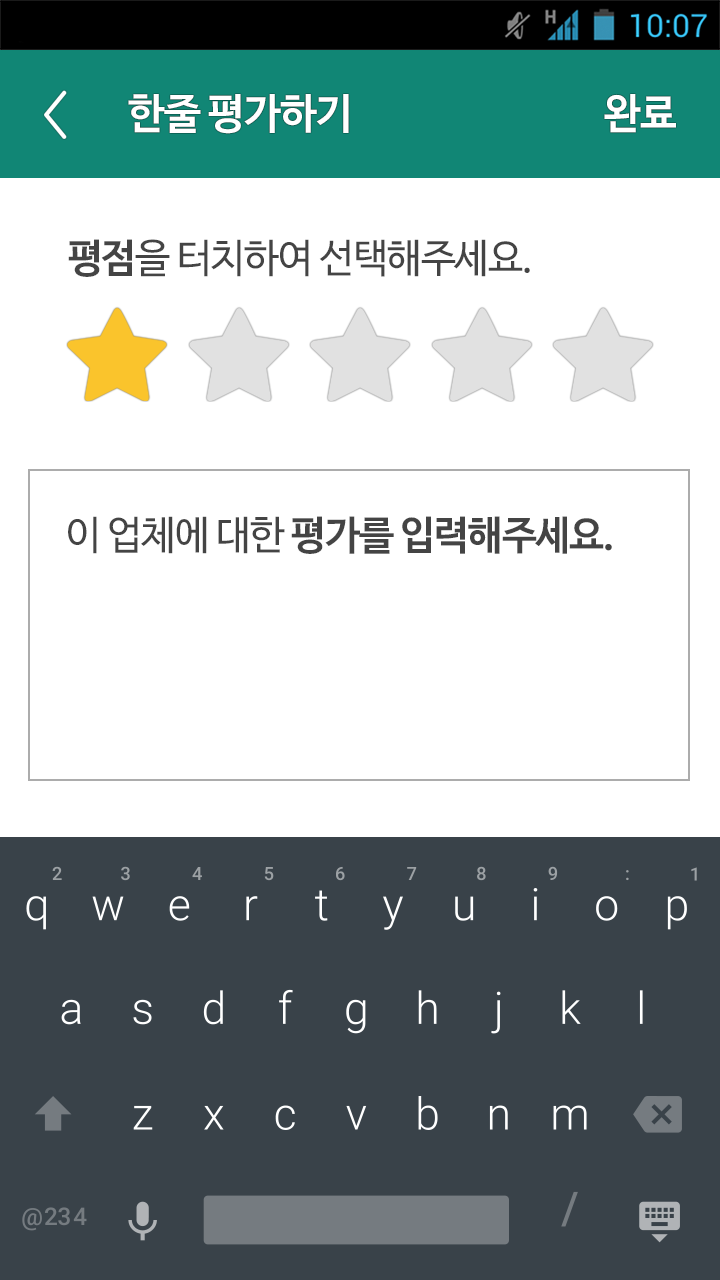
<style>
.page{position:relative;width:720px;height:1280px;background:#ffffff}
.page>*{position:absolute;margin:0}
.t1{font:42px "NanumBarunGothicOTFBold";letter-spacing:-0.02em;color:#ffffff}
.t2{font:40px "NanumBarunGothicOTF";letter-spacing:-0.03em;color:#444444}
.t3{font:40px "NanumBarunGothicOTFBold";letter-spacing:-0.03em;color:#444444}
</style>
<div class="page">
<p class="t1" style="left:128px;top:94px;width:221px;height:40px">한줄 평가하기</p>
<p class="t1" style="left:604px;top:94px;width:72px;height:39px">완료</p>
<p class="t2" style="left:68px;top:239px;width:462px;height:38px"><span class="t3">평점</span>을 터치하여 선택해주세요.</p>
<p class="t3" style="left:68px;top:516px;width:544px;height:38px"><span class="t2">이 업체에 대한 </span>평가를 입력해주세요.</p>
</div>
